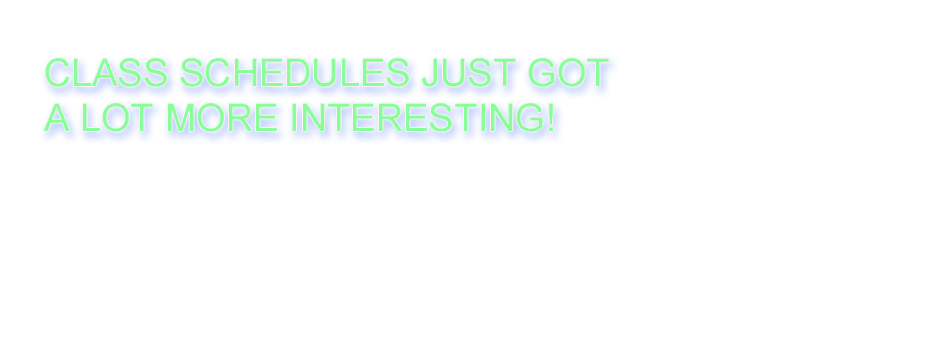
<style>
.page{position:relative;width:931px;height:350px;background:#ffffff}
.page>*{position:absolute;margin:0}
.t1{font:37.8px "Small Fonts";color:#88ff96}
</style>
<div class="page">
<p class="t1" style="left:44px;top:58px;width:565px;height:74px">CLASS SCHEDULES JUST GOT<br>A LOT MORE INTERESTING!</p>
</div>
